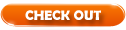
<style>
.page{position:relative;width:126px;height:30px;background:#ffffff}
.page>*{position:absolute;margin:0}
.t1{font:14px "BerlinSansFBDemi-Bold";color:#ffffff;text-transform:uppercase}
</style>
<div class="page">
<p class="t1" style="left:25px;top:10px;width:76px;height:10px">check out</p>
</div>
